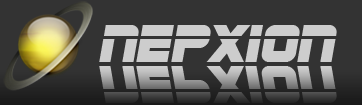
<style>
.page{position:relative;width:362px;height:105px;background:#333333}
.page>*{position:absolute;margin:0}
.t1{font:56px "SFSportsNight";color:#cdcdcd}
</style>
<div class="page">
<p class="t1" style="left:99px;top:25px;width:238px;height:37px">Nepxion</p>
</div>
